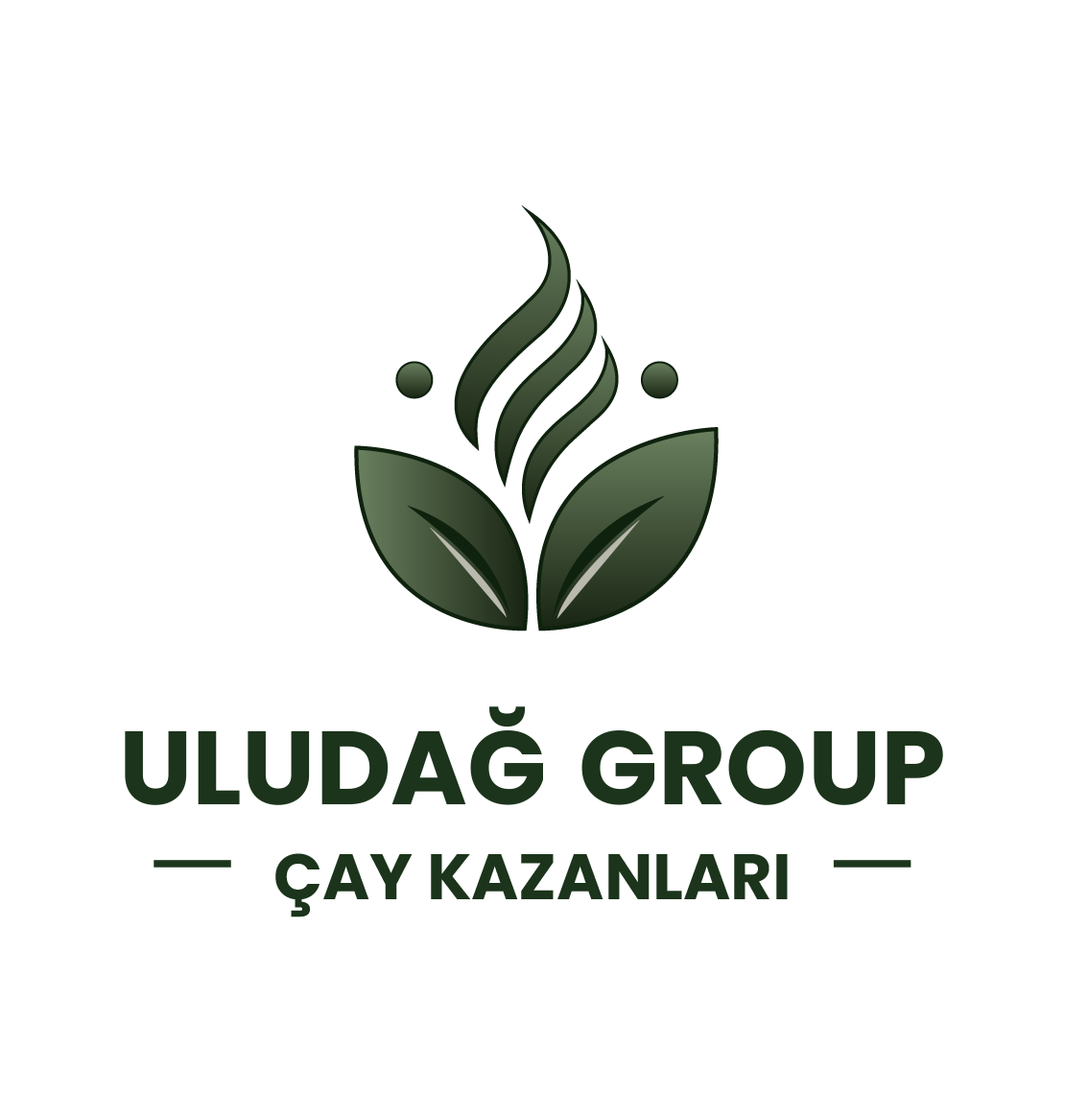
<style>
.page{position:relative;width:1065px;height:1119px;background:#ffffff}
.page>*{position:absolute;margin:0}
.t1{font:104px "Poppins-Bold";color:#1c351c}
.t2{font:64.2px "Poppins-Bold";color:#1c351c}
</style>
<div class="page">
<p class="t1" style="left:125px;top:706px;width:819px;height:99px">ULUDAĞ  GROUP</p>
<p class="t2" style="left:275px;top:853px;width:513px;height:65px">ÇAY KAZANLARI</p>
</div>
